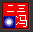
<style>
.page{position:relative;width:33px;height:32px;background:#f20000}
.page>*{position:absolute;margin:0}
.t1{font:10.4px "SimSun";color:#ffffff}
.t2{font:11.7px "SimSun";color:#ffffff}
</style>
<div class="page">
<p class="t1" style="left:7px;top:5px;width:18px;height:7px">二三</p>
<p class="t2" style="left:16px;top:15px;width:11px;height:12px">冯</p>
</div>
